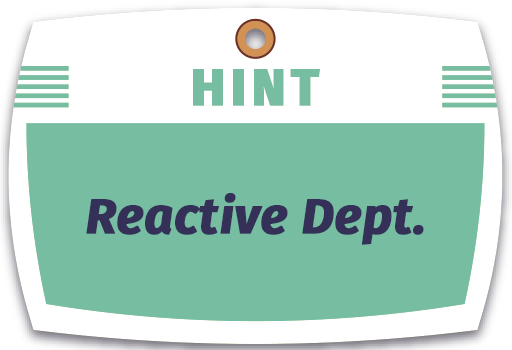
<style>
.page{position:relative;width:512px;height:350px;background:#77bda2}
.page>*{position:absolute;margin:0}
.t1{font:51.8px "FiraSans-ExtraBold";letter-spacing:0.08em;color:#77bda2;font-weight:bold}
.t2{font:50px "FiraSans-BoldItalic";color:#343058;font-weight:bold}
</style>
<div class="page">
<p class="t1" style="left:193px;top:69px;width:127px;height:37px">HINT</p>
<p class="t2" style="left:86px;top:193px;width:338px;height:52px">Reactive Dept.</p>
</div>
